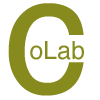
<style>
.page{position:relative;width:100px;height:100px;background:#ffffff}
.page>*{position:absolute;margin:0}
.t1{font:166.7px "Helvetica";color:#878b1d}
.t2{font:25px "Helvetica";color:#878b1d}
</style>
<div class="page">
<p class="t1" style="left:8px;top:3px;width:76px;height:93px">c</p>
<p class="t2" style="left:30px;top:41px;width:54px;height:19px">oLab</p>
</div>
